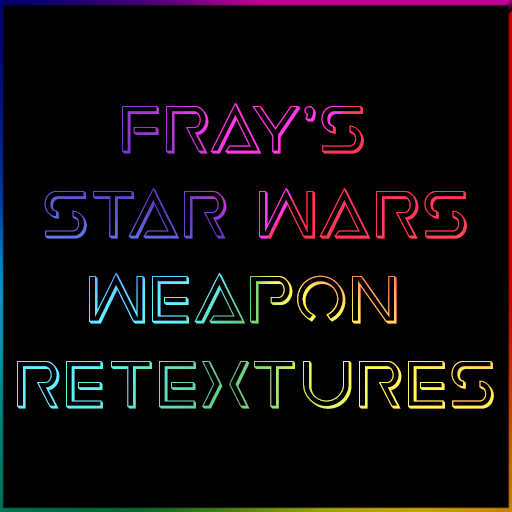
<style>
.page{position:relative;width:512px;height:512px;background:#000000}
.page>*{position:absolute;margin:0}
.t1{font:70.8px "EarthOrbiter3D"}
</style>
<div class="page">
<p class="t1" style="left:17px;top:102px;width:477px;height:307px;text-align:center">Fray’s <br>Star Wars<br>Weapon <br>Retextures</p>
</div>
